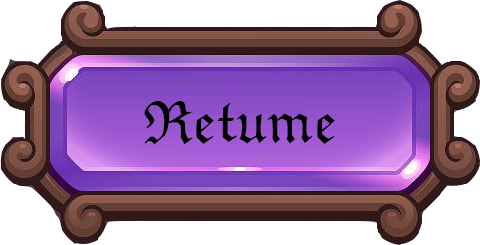
<style>
.page{position:relative;width:480px;height:245px;background:#ffffff}
.page>*{position:absolute;margin:0}
.t1{font:60px "EuclidFraktur";color:#000000}
</style>
<div class="page">
<p class="t1" style="left:144px;top:101px;width:191px;height:44px">Retume</p>
</div>
